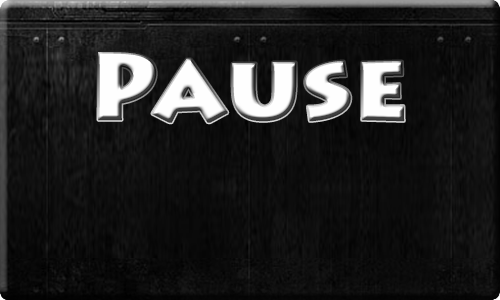
<style>
.page{position:relative;width:500px;height:300px}
.page>*{position:absolute;margin:0}
.t1{font:94.6px "LithosPro-Black";color:#fefefe;font-weight:bold}
</style>
<div class="page">
<p class="t1" style="left:98px;top:52px;width:307px;height:71px">Pause</p>
</div>
